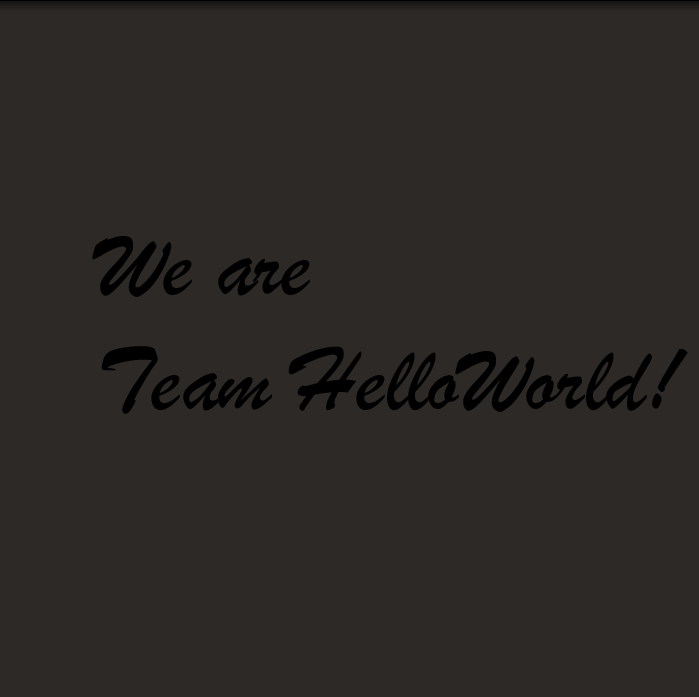
<style>
.page{position:relative;width:699px;height:697px;background:#2c2926}
.page>*{position:absolute;margin:0}
.t1{font:96px "STXingkai";color:#000000}
</style>
<div class="page">
<p class="t1" style="left:92px;top:236px;width:596px;height:178px">We are <br>Team HelloWorld!</p>
</div>
